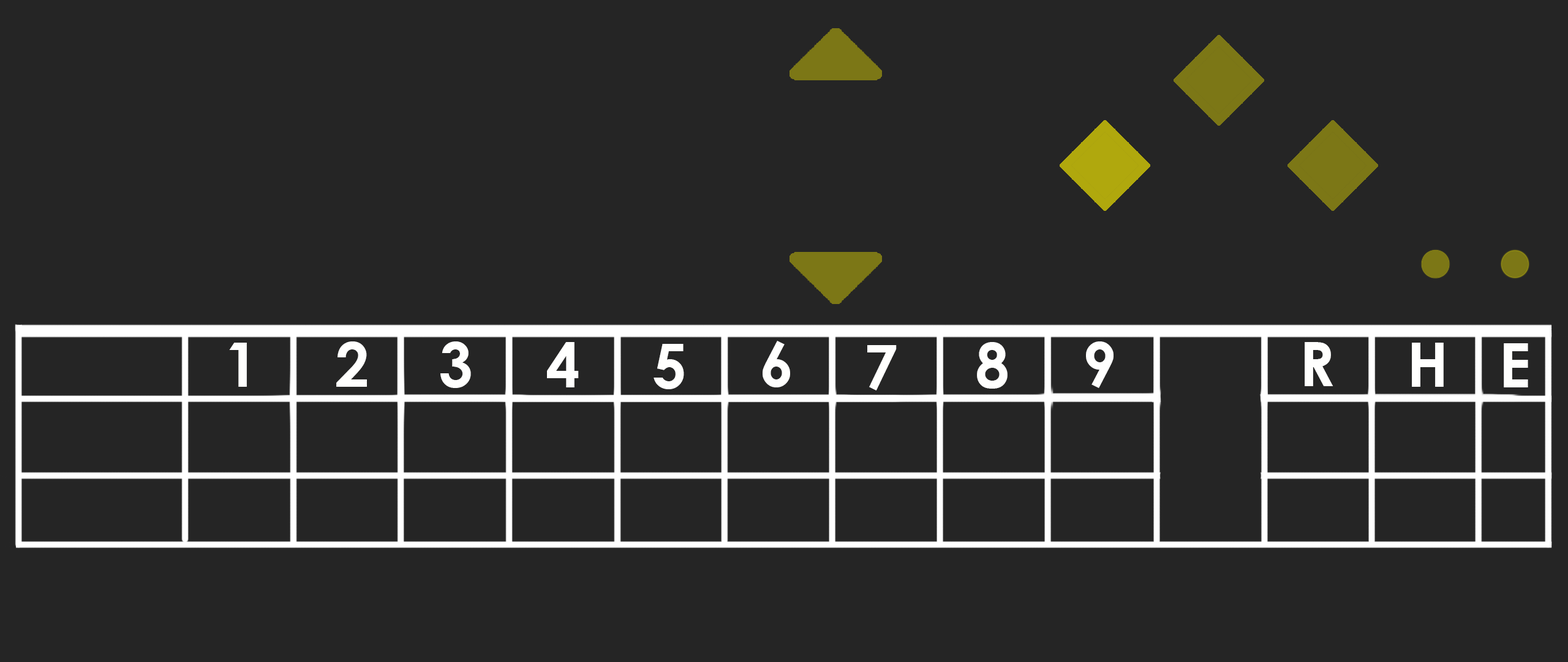
<style>
.page{position:relative;width:1568px;height:662px;background:#252525}
.page>*{position:absolute;margin:0}
.t1{font:61.3px "CenturyGothic-Bold";color:#fffffe}
</style>
<div class="page">
<p class="t1" style="left:336px;top:341px;width:31px;height:45px">2</p>
<p class="t1" style="left:440px;top:341px;width:31px;height:47px">3</p>
<p class="t1" style="left:547px;top:342px;width:32px;height:45px">4</p>
<p class="t1" style="left:763px;top:341px;width:27px;height:46px">6</p>
<p class="t1" style="left:977px;top:342px;width:31px;height:46px">8</p>
<p class="t1" style="left:1086px;top:341px;width:28px;height:47px">9</p>
<p class="t1" style="left:1305px;top:342px;width:28px;height:44px">R</p>
<p class="t1" style="left:229px;top:342px;width:18px;height:44px">1</p>
<p class="t1" style="left:654px;top:344px;width:30px;height:45px">5</p>
<p class="t1" style="left:867px;top:345px;width:30px;height:45px">7</p>
<p class="t1" style="left:1412px;top:342px;width:32px;height:44px">H</p>
<p class="t1" style="left:1504px;top:343px;width:24px;height:44px">E</p>
</div>
